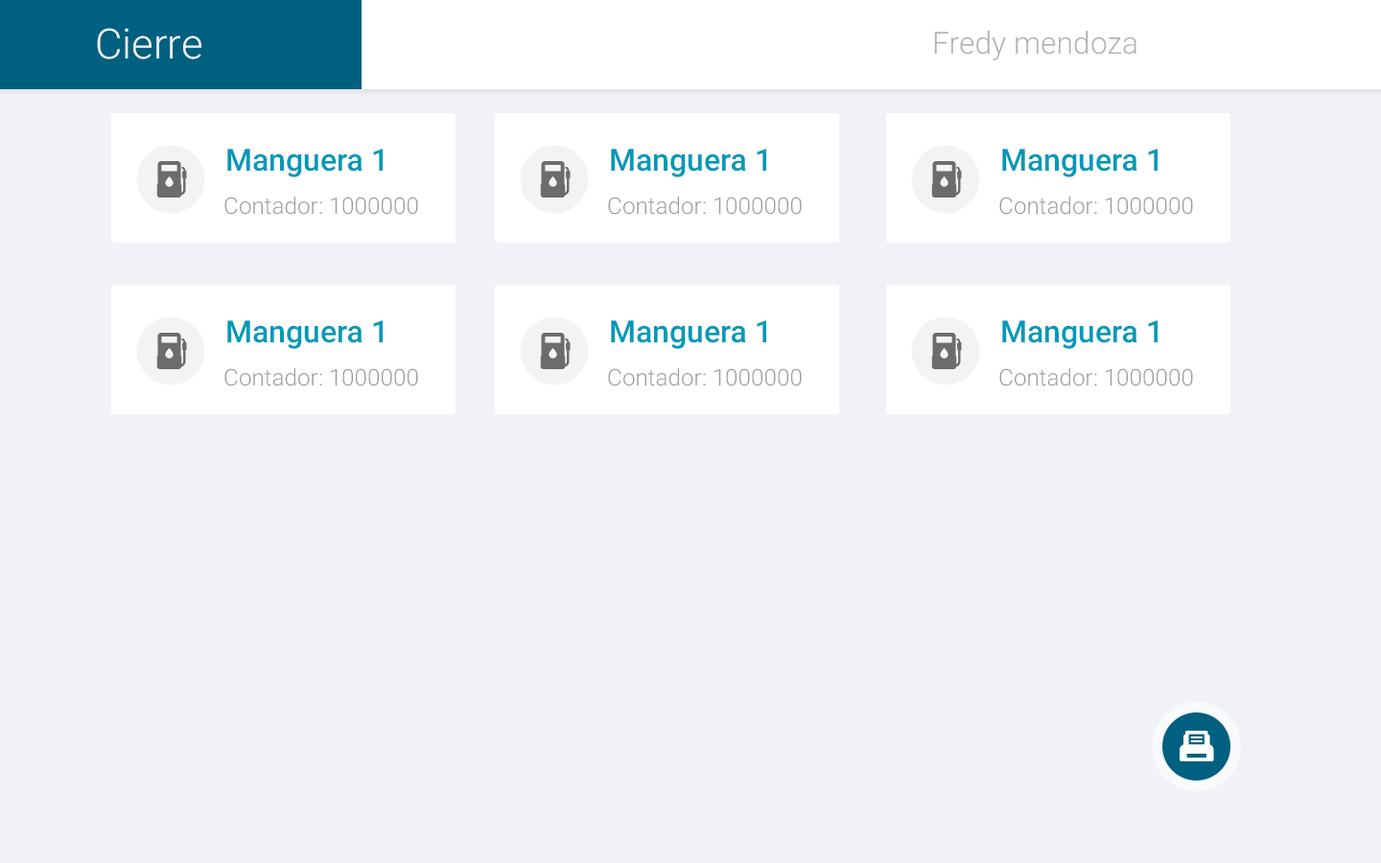
<style>
.page{position:relative;width:1381px;height:863px;background:#f1f2f7}
.page>*{position:absolute;margin:0}
.t1{font:41.7px "Roboto-Light";color:#f3f3f3}
.t2{font:30.7px "Roboto-Light";color:#b4b1b1}
.t3{font:30.7px "Roboto-Medium";color:#0099b9}
.t4{font:23px "Roboto-Light";color:#9d9d9d}
</style>
<div class="page">
<p class="t1" style="left:97px;top:28px;width:104px;height:31px">Cierre</p>
<p class="t2" style="left:934px;top:31px;width:203px;height:29px">Fredy mendoza</p>
<p class="t3" style="left:227px;top:149px;width:156px;height:28px">Manguera 1</p>
<p class="t3" style="left:611px;top:149px;width:155px;height:28px">Manguera 1</p>
<p class="t3" style="left:1002px;top:149px;width:156px;height:28px">Manguera 1</p>
<p class="t4" style="left:224px;top:197px;width:194px;height:18px">Contador: 1000000</p>
<p class="t4" style="left:608px;top:197px;width:194px;height:18px">Contador: 1000000</p>
<p class="t4" style="left:999px;top:197px;width:194px;height:18px">Contador: 1000000</p>
<p class="t3" style="left:227px;top:320px;width:156px;height:29px">Manguera 1</p>
<p class="t3" style="left:611px;top:320px;width:155px;height:29px">Manguera 1</p>
<p class="t3" style="left:1002px;top:320px;width:156px;height:29px">Manguera 1</p>
<p class="t4" style="left:224px;top:368px;width:194px;height:19px">Contador: 1000000</p>
<p class="t4" style="left:608px;top:368px;width:194px;height:19px">Contador: 1000000</p>
<p class="t4" style="left:999px;top:368px;width:194px;height:19px">Contador: 1000000</p>
</div>
